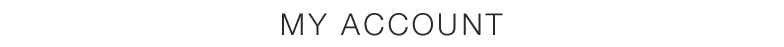
<style>
.page{position:relative;width:784px;height:47px;background:#ffffff}
.page>*{position:absolute;margin:0}
.t1{font:30px "HelveticaNeue-Light";letter-spacing:0.11em;color:#2a2a2a}
</style>
<div class="page">
<p class="t1" style="left:282px;top:13px;width:221px;height:23px">MY ACCOUNT</p>
</div>
